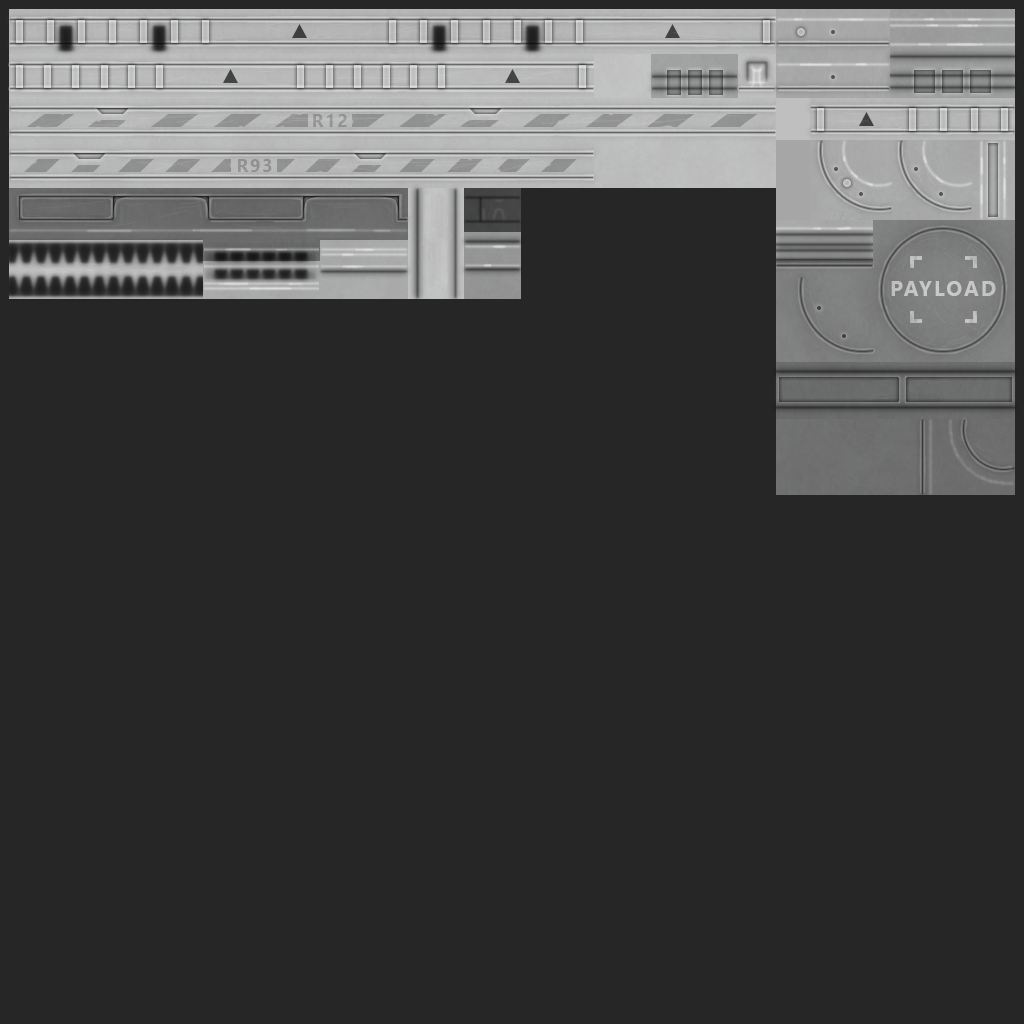
<style>
.page{position:relative;width:1024px;height:1024px;background:#262626}
.page>*{position:absolute;margin:0}
.t1{font:18px "SegoeUI-Bold";letter-spacing:0.1em;color:#8c8c8c}
.t2{font:21px "SegoeUI-Bold";letter-spacing:0.1em;color:#cccccc}
</style>
<div class="page">
<p class="t1" style="left:313px;top:114px;width:34px;height:13px">R12</p>
<p class="t1" style="left:238px;top:159px;width:34px;height:13px">R93</p>
<p class="t2" style="left:891px;top:281px;width:105px;height:15px">PAYLOAD</p>
</div>
